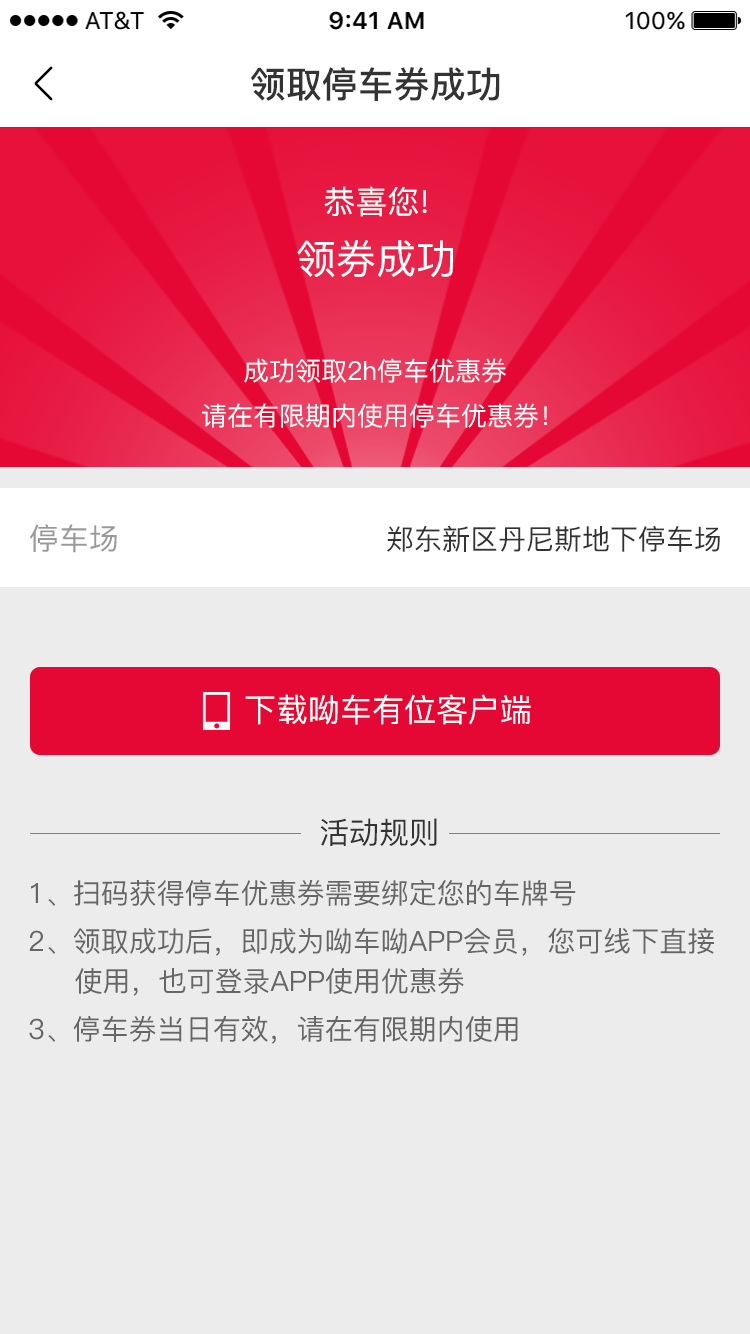
<style>
.page{position:relative;width:750px;height:1334px;background:#ececec}
.page>*{position:absolute;margin:0}
.t1{font:36px "PingFang-SC-Bold";color:#333333}
.t2{font:32px "PingFang-SC-Medium";color:#ffffff}
.t3{font:40px "PingFang-SC-Medium";color:#ffffff}
.t4{font:26px "PingFang-SC-Medium";color:#ffffff}
.t5{font:30px "PingFang-SC-Medium";color:#999999}
.t6{font:28px "PingFang-SC-Medium";color:#333333}
.t7{font:30px "PingFang-SC-Medium";color:#333333}
.t8{font:28px/40px "PingFang-SC-Medium";color:#666666}
.t9{font:28px/48px "PingFang-SC-Medium";color:#666666}
</style>
<div class="page">
<p class="t1" style="left:250px;top:67px;width:250px;height:34px">领取停车券成功</p>
<p class="t2" style="left:324px;top:186px;width:103px;height:31px">恭喜您!</p>
<p class="t3" style="left:297px;top:240px;width:156px;height:38px">领券成功</p>
<p class="t4" style="left:244px;top:358px;width:262px;height:25px">成功领取2h停车优惠券</p>
<p class="t4" style="left:202px;top:403px;width:345px;height:25px">请在有限期内使用停车优惠券！</p>
<p class="t5" style="left:30px;top:524px;width:87px;height:29px">停车场</p>
<p class="t6" style="left:387px;top:525px;width:333px;height:27px">郑东新区丹尼斯地下停车场</p>
<p class="t2" style="left:245px;top:694px;width:286px;height:31px">下载呦车有位客户端</p>
<p class="t7" style="left:320px;top:818px;width:117px;height:29px">活动规则</p>
<p class="t8" style="left:29px;top:879px;width:685px;height:165px"><span class="t9">1、扫码获得停车优惠券需要绑定您的车牌号<br></span>2、领取成功后，即成为呦车呦APP会员，您可线下直接<br>     <span class="t9">使用，也可登录APP使用优惠券<br></span>3、停车券当日有效，请在有限期内使用</p>
</div>
